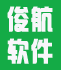
<style>
.page{position:relative;width:61px;height:70px;background:#14ab46}
.page>*{position:absolute;margin:0}
.t1{font:27px "hzgb";letter-spacing:0.05em;color:#f8f6fa;font-weight:bold;scale:0.82 1}
</style>
<div class="page">
<p class="t1" style="left:7px;top:6px;width:46px;height:58px">俊航<br>软件</p>
</div>
